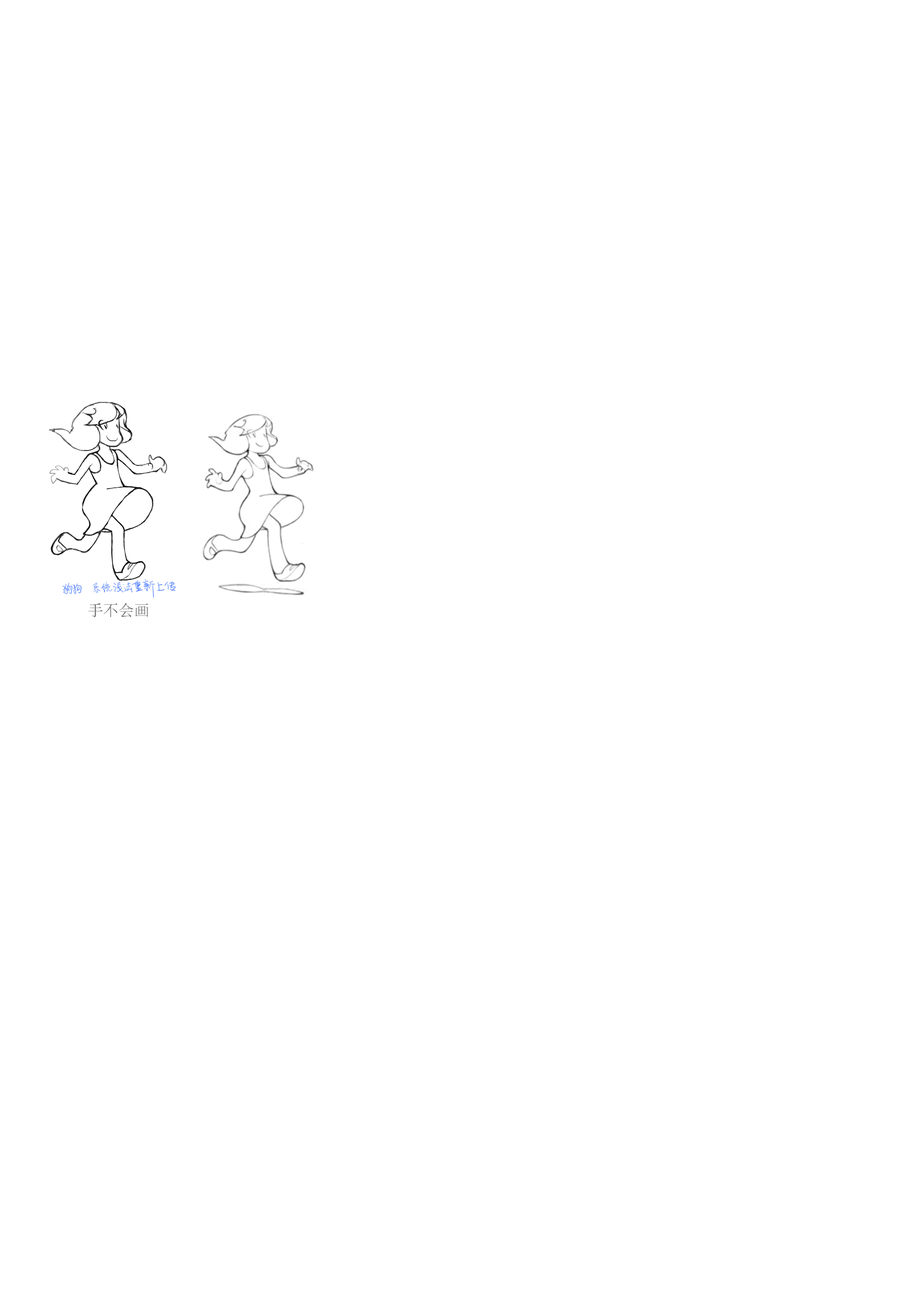
<style>
.page{position:relative;width:918px;height:1299px;background:#ffffff}
.page>*{position:absolute;margin:0}
.t1{font:15.4px "SimSun";color:#747474}
</style>
<div class="page">
<p class="t1" style="left:88px;top:603px;width:60px;height:14px">手不会画</p>
</div>
